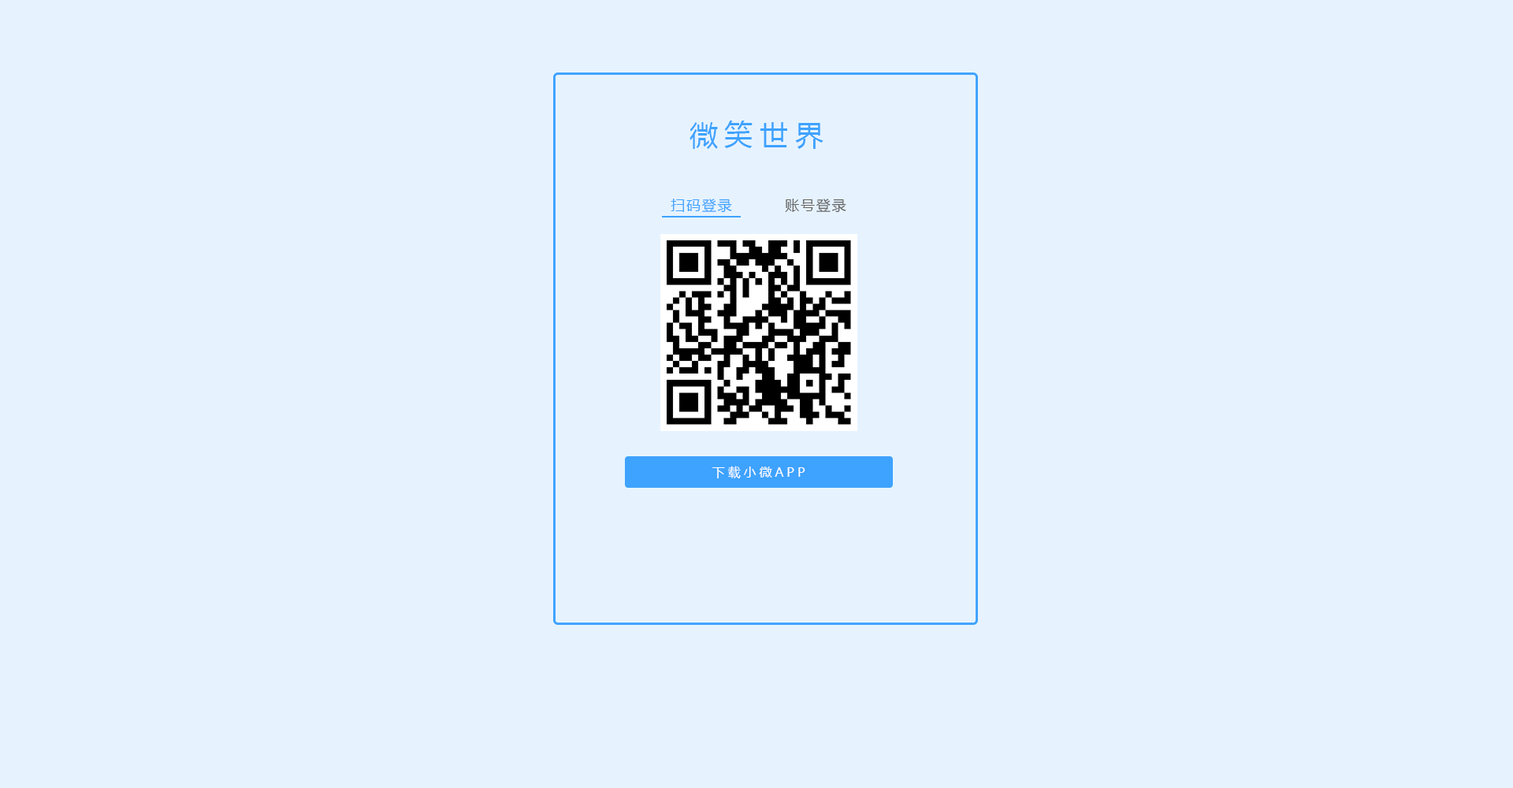
<style>
.page{position:relative;width:1513px;height:788px;background:#e6f3ff}
.page>*{position:absolute;margin:0}
.t1{font:28.4px "MicrosoftYaHei";letter-spacing:0.24em;color:#3ea2ff}
.t2{font:14.2px "MicrosoftYaHei";letter-spacing:0.1em;color:#3ea2ff}
.t3{font:14.2px "MicrosoftYaHei";letter-spacing:0.1em;color:#666666}
.t4{font:12.6px "MicrosoftYaHei";letter-spacing:0.24em;color:#ffffff}
</style>
<div class="page">
<p class="t1" style="left:690px;top:121px;width:134px;height:28px">微笑世界</p>
<p class="t2" style="left:671px;top:199px;width:61px;height:14px">扫码登录</p>
<p class="t3" style="left:785px;top:199px;width:61px;height:14px">账号登录</p>
<p class="t4" style="left:712px;top:466px;width:93px;height:13px">下载小微APP</p>
</div>
